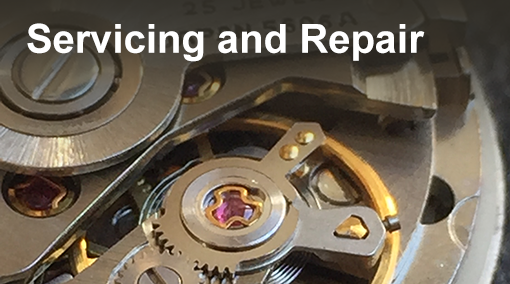
<style>
.page{position:relative;width:510px;height:284px}
.page>*{position:absolute;margin:0}
.t1{font:40px "Arial-BoldMT";color:#ffffff}
</style>
<div class="page">
<p class="t1" style="left:27px;top:23px;width:398px;height:39px">Servicing and Repair</p>
</div>
